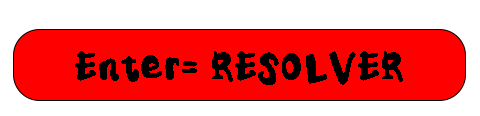
<style>
.page{position:relative;width:480px;height:116px;background:#ff0000}
.page>*{position:absolute;margin:0}
.t1{font:41.7px "Kidsnote";color:#000000}
</style>
<div class="page">
<p class="t1" style="left:75px;top:51px;width:328px;height:34px">Enter= RESOLVER</p>
</div>
